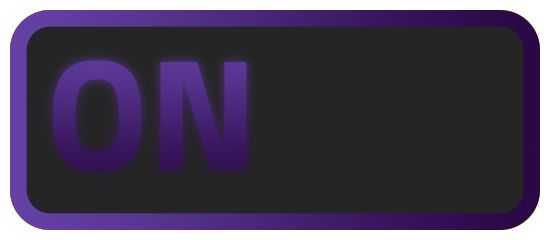
<style>
.page{position:relative;width:550px;height:240px;background:#252525}
.page>*{position:absolute;margin:0}
.t1{font:37.8px "TitilliumWeb-Bold"}
</style>
<div class="page">
<p class="t1" style="left:52px;top:60px;width:195px;height:111px">ON</p>
</div>
